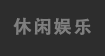
<style>
.page{position:relative;width:105px;height:56px;background:#2d2d2d}
.page>*{position:absolute;margin:0}
.t1{font:18px "AdobeHeitiStd-Regular";letter-spacing:0.085em;color:#7f7f7f;font-weight:bold}
</style>
<div class="page">
<p class="t1" style="left:13px;top:17px;width:78px;height:18px">休闲娱乐</p>
</div>
